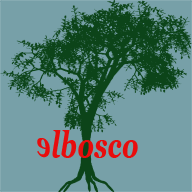
<style>
.page{position:relative;width:192px;height:192px;background:#77a0a8}
.page>*{position:absolute;margin:0}
.t1{font:37.4px "Georgia-BoldItalic";color:#e80c0c;scale:0.69 1}
.t2{font:37.4px "Georgia";color:#ffffff;scale:0.69 1}
</style>
<div class="page">
<p class="t1" style="left:52px;top:130px;width:86px;height:28px"><span class="t2">  </span>lbosco</p>
<p class="t1" style="left:37px;top:138px;width:13px;height:20px;rotate:-177deg">e</p>
</div>
